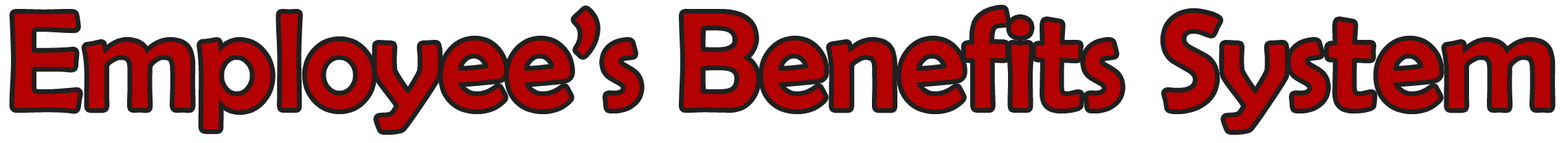
<style>
.page{position:relative;width:1568px;height:143px;background:#ffffff}
.page>*{position:absolute;margin:0}
.t1{font:137.4px "BerlinSansFB-Reg";color:#b40101}
</style>
<div class="page">
<p class="t1" style="left:14px;top:9px;width:1537px;height:121px">Employee’s Benefits System</p>
</div>
